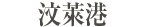
<style>
.page{position:relative;width:145px;height:27px;background:#ffffff}
.page>*{position:absolute;margin:0}
.t1{font:26px "RyuminPro-ExBold";color:#4c4843;scale:0.9 1}
</style>
<div class="page">
<p class="t1" style="left:38px;top:1px;width:70px;height:26px">汶萊港</p>
</div>
